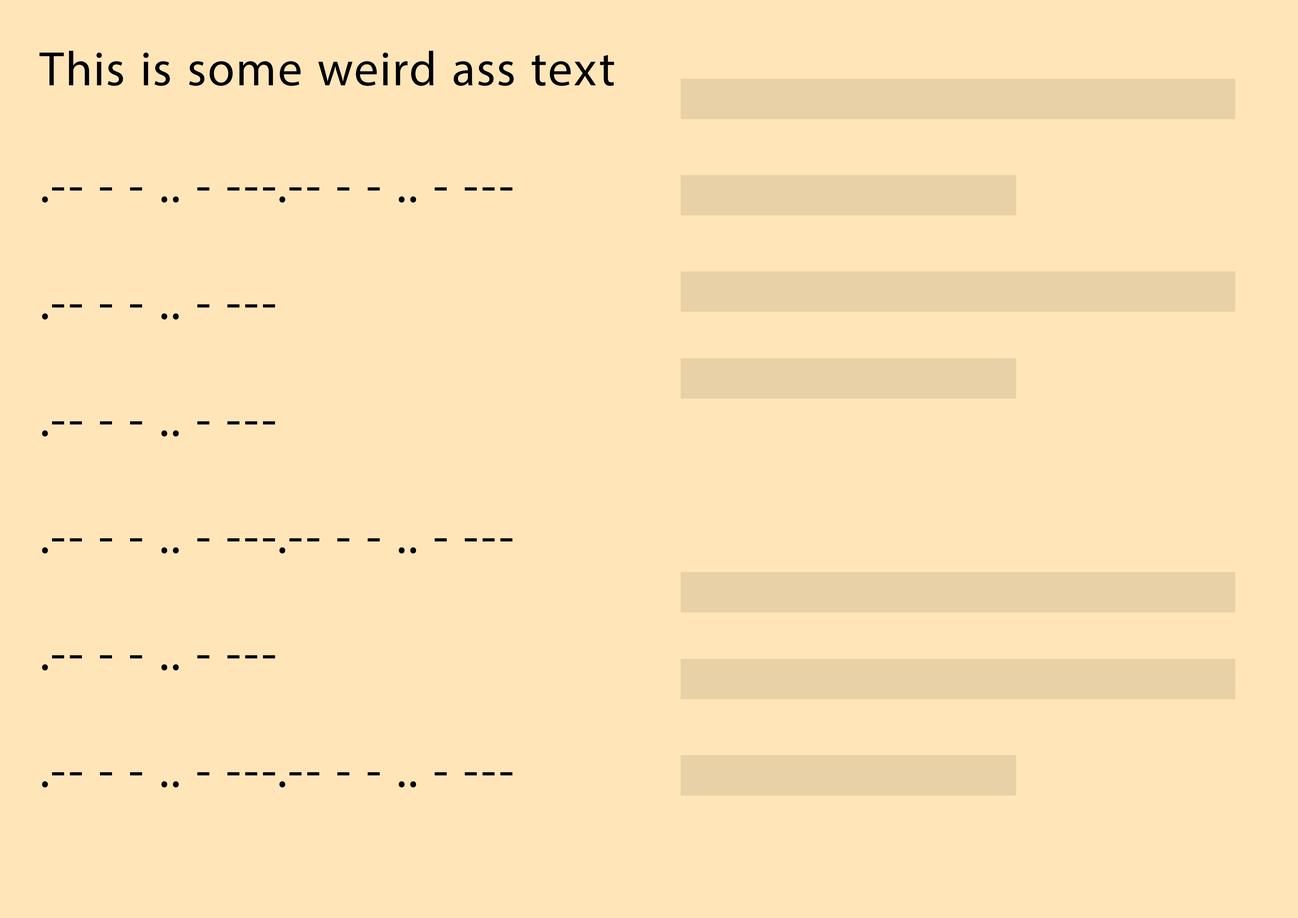
<style>
.page{position:relative;width:1298px;height:918px;background:#ffe5b8}
.page>*{position:absolute;margin:0}
.t1{font:48.7px "MyriadPro-Regular";letter-spacing:0.05em;color:#000000}
</style>
<div class="page">
<p class="t1" style="left:39px;top:51px;width:575px;height:737px">This is some weird ass text<br><br>.-- - - .. - ---.-- - - .. - ---<br><br>.-- - - .. - ---<br><br>.-- - - .. - ---<br><br>.-- - - .. - ---.-- - - .. - ---<br><br>.-- - - .. - ---<br><br>.-- - - .. - ---.-- - - .. - ---</p>
</div>
